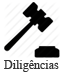
<style>
.page{position:relative;width:64px;height:74px;background:#ffffff}
.page>*{position:absolute;margin:0}
.t1{font:12px "TimesNewRomanPSMT";color:#333333}
</style>
<div class="page">
<p class="t1" style="left:4px;top:60px;width:55px;height:12px">Diligências</p>
</div>
